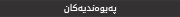
<style>
.page{position:relative;width:180px;height:17px;background:#333132}
.page>*{position:absolute;margin:0}
.t1{font:9px "DroidArabicKufi";color:#ffffff}
</style>
<div class="page">
<p class="t1" style="left:64px;top:4px;width:53px;height:10px">پەیوەندیەکان</p>
</div>
